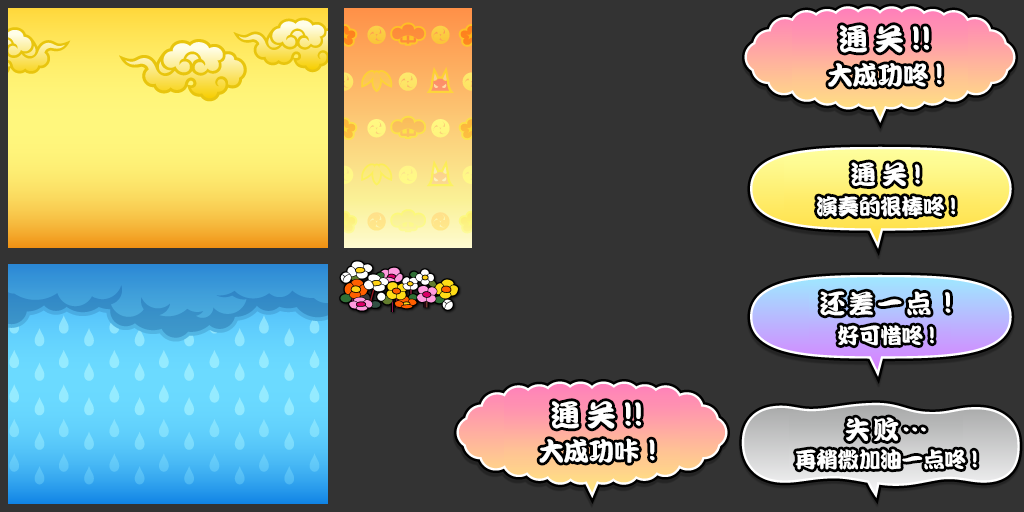
<style>
.page{position:relative;width:1024px;height:512px;background:#333333}
.page>*{position:absolute;margin:0}
.t1{font:30px "DFPKanTingLiuW9";letter-spacing:0.2em;color:#ffffff}
.t2{font:34px "DFPKanTingLiuW9";letter-spacing:-0.03em;color:#ffffff}
.t3{font:26px "DFPKanTingLiuW9";letter-spacing:-0.03em;color:#ffffff}
.t4{font:26px "DFPKanTingLiuW9";letter-spacing:0.2em;color:#ffffff}
.t5{font:30px "DFPKanTingLiuW9";color:#ffffff}
.t6{font:28px "DFPKanTingLiuW9";color:#ffffff}
.t7{font:22px "DFPKanTingLiuW9";letter-spacing:-0.03em;color:#ffffff}
.t8{font:22px "DFPKanTingLiuW9";letter-spacing:0.2em;color:#ffffff}
.t9{font:24px "DFPKanTingLiuW9";color:#ffffff}
.t10{font:26px "DFPKanTingLiuW9";letter-spacing:0.1em;color:#ffffff}
</style>
<div class="page">
<p class="t1" style="left:839px;top:25px;width:90px;height:28px">通关<span class="t2">!!</span></p>
<p class="t3" style="left:828px;top:63px;width:114px;height:24px">大成功<span class="t4">咚</span><span class="t5">!</span></p>
<p class="t4" style="left:851px;top:162px;width:69px;height:24px">通关<span class="t6">!</span></p>
<p class="t7" style="left:817px;top:196px;width:138px;height:21px">演奏的很棒<span class="t8">咚</span><span class="t9">!</span></p>
<p class="t10" style="left:820px;top:291px;width:131px;height:25px">还差一点 <span class="t1">!</span></p>
<p class="t7" style="left:838px;top:325px;width:96px;height:21px">好可惜<span class="t8">咚</span><span class="t9">!</span></p>
<p class="t1" style="left:551px;top:401px;width:90px;height:28px">通关<span class="t2">!!</span></p>
<p class="t10" style="left:845px;top:417px;width:81px;height:24px">失败…</p>
<p class="t3" style="left:539px;top:438px;width:116px;height:25px">大成功咔 <span class="t5">!</span></p>
<p class="t7" style="left:795px;top:449px;width:182px;height:21px">再稍微加油一点<span class="t8">咚</span><span class="t9">!</span></p>
</div>
